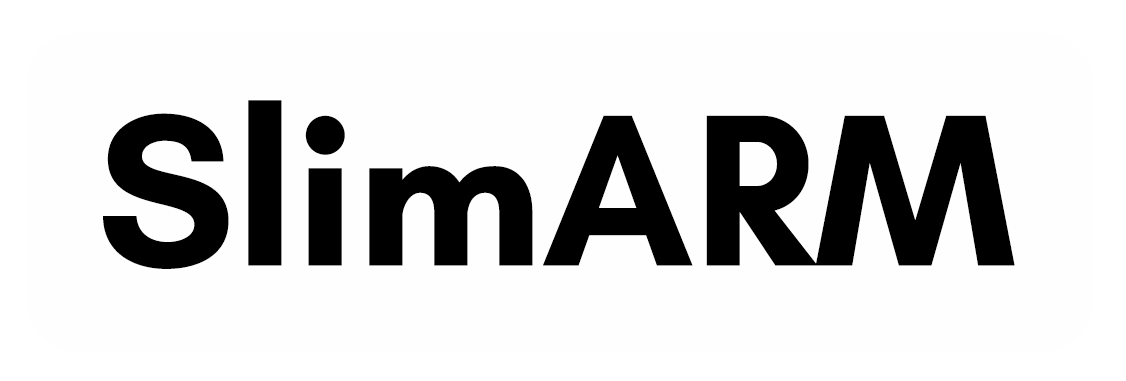
<style>
.page{position:relative;width:1126px;height:381px;background:#fefefe}
.page>*{position:absolute;margin:0}
.t1{font:220px "GlacialIndifference-Bold";color:#000000}
</style>
<div class="page">
<p class="t1" style="left:103px;top:100px;width:912px;height:169px">SlimARM</p>
</div>
